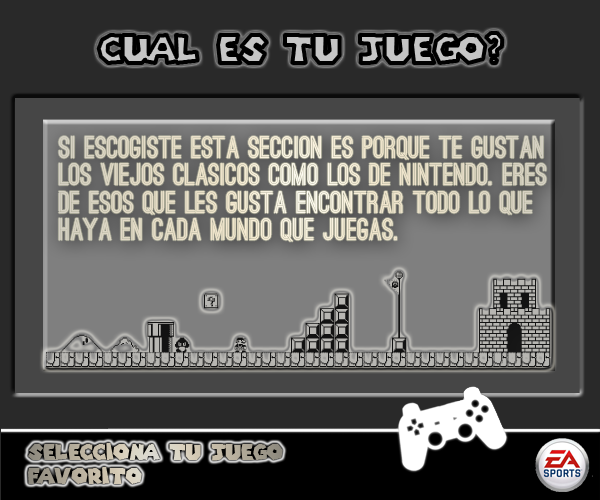
<style>
.page{position:relative;width:600px;height:500px;background:#292929}
.page>*{position:absolute;margin:0}
.t1{font:38.2px "SuperMarioGalaxy";scale:0.97 1}
.t2{font:29.4px "OstrichSans-Bold";color:#ede2cb;scale:0.97 1}
.t3{font:29.4px "Mushroom-Kingdom-NBP";color:#121212;scale:0.97 1}
.t4{font:21.6px/33px "SuperMarioGalaxy";scale:0.97 1}
</style>
<div class="page">
<p class="t1" style="left:98px;top:33px;width:405px;height:30px">Cual es tu juego?</p>
<p class="t2" style="left:58px;top:136px;width:489px;height:106px">Si escogiste esta seccion es porque te gustan <br>los viejos clasicos como los de nintendo. Eres <br>de esos que les gusta encontrar todo lo que <br>haya en cada mundo que juegas.</p>
<p class="t3" style="left:46px;top:271px;width:505px;height:96px">ABCDlaIamaaaefghaaapaaaaak</p>
<p class="t4" style="left:28px;top:443px;width:255px;height:41px">Selecciona tu juego <br>favorito</p>
</div>
